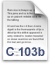
<style>
.page{position:relative;width:51px;height:64px}
.page>*{position:absolute;margin:0}
.t1{font:12px "Arial-BoldMT";color:#475479}
</style>
<div class="page">
<p class="t1" style="left:6px;top:47px;width:39px;height:9px">C 103b</p>
</div>
